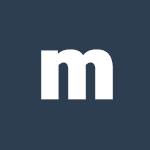
<style>
.page{position:relative;width:150px;height:150px;background:#2c3e50}
.page>*{position:absolute;margin:0}
.t1{font:90px "Roboto-Black";color:#ffffff;font-weight:bold}
</style>
<div class="page">
<p class="t1" style="left:41px;top:49px;width:72px;height:51px">m</p>
</div>
